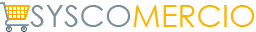
<style>
.page{position:relative;width:256px;height:32px;background:#ffffff}
.page>*{position:absolute;margin:0}
.t1{font:31.2px "CenturyGothic";color:#ffb300}
.t2{font:31.2px "CenturyGothic";color:#7a919d}
</style>
<div class="page">
<p class="t1" style="left:30px;top:5px;width:225px;height:22px"><span class="t2">SYSCO</span>MERCIO</p>
</div>
